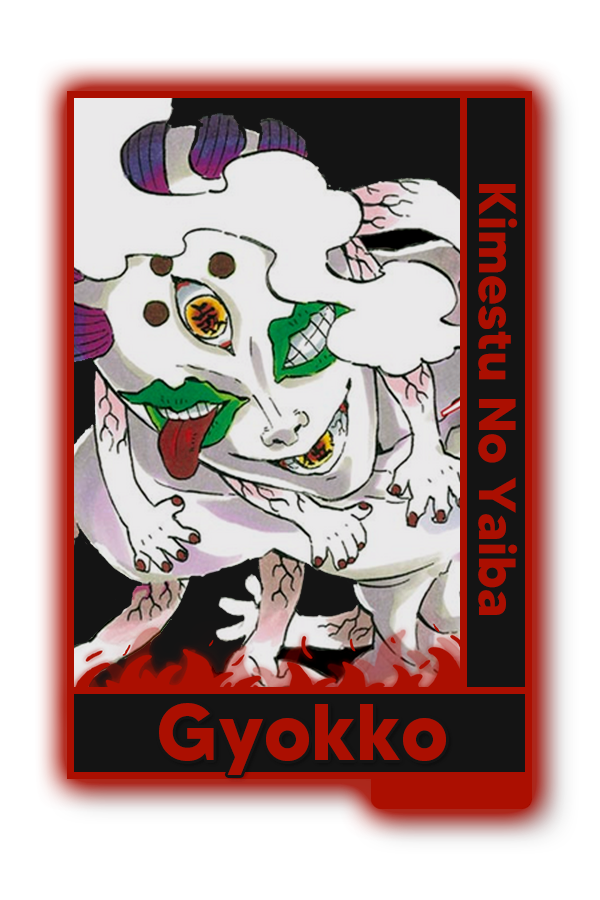
<style>
.page{position:relative;width:600px;height:900px;background:#ffffff}
.page>*{position:absolute;margin:0}
.t1{font:52px "MADETOMMY-Bold";color:#ab0f01}
.t2{font:79.9px "MADETOMMY-Bold";color:#ab0f01}
</style>
<div class="page">
<p class="t1" style="left:478px;top:184px;width:40px;height:431px;rotate:90deg">Kimestu No Yaiba</p>
<p class="t2" style="left:159px;top:703px;width:287px;height:72px">Gyokko</p>
</div>
